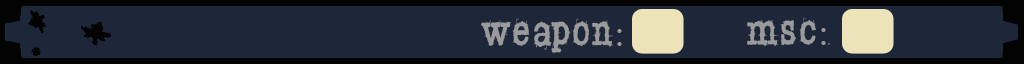
<style>
.page{position:relative;width:1024px;height:64px;background:#1e273a}
.page>*{position:absolute;margin:0}
.t1{font:36px "Pithazard";color:#9a9a9a}
.t2{font:36px "BookAntiqua";color:#9a9a9a}
</style>
<div class="page">
<p class="t1" style="left:746px;top:17px;width:84px;height:29px">MSC<span class="t2">:</span>.</p>
<p class="t1" style="left:481px;top:18px;width:141px;height:36px">WEAPON<span class="t2">:</span></p>
</div>
